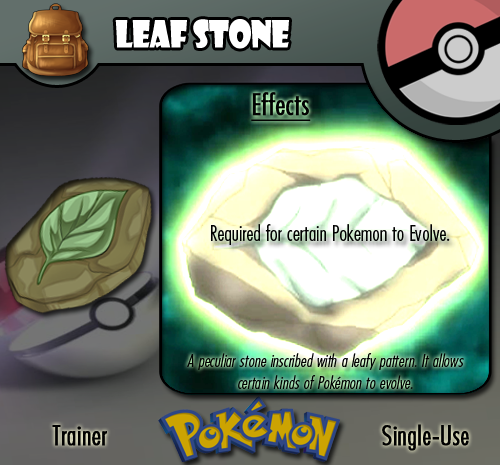
<style>
.page{position:relative;width:500px;height:465px}
.page>*{position:absolute;margin:0}
.t1{font:36.7px "ShowcardGothic-Reg";letter-spacing:-0.025em;color:#ffffff;scale:0.91 1}
.t2{font:22.2px "FuturaCondensedBQ-Light";color:#020202}
.t3{font:27.8px "FuturaCondensedBQ-Light";color:#020202;font-weight:bold}
.t4{font:30.6px "FuturaCondensedBQ-Light";color:#020202;font-weight:bold;text-decoration:underline}
.t5{font:18.1px "FuturaCondensedBQ-Light";color:#010101;font-style:italic}
.t6{font:27.8px "FuturaCondensedBQ-Light";color:#010101;font-weight:bold}
</style>
<div class="page">
<p class="t1" style="left:115px;top:19px;width:174px;height:30px">Leaf Stone</p>
<p class="t2" style="left:211px;top:92px;width:239px;height:153px"><span class="t3">  </span><span class="t4">Effects<br><br><br><br></span>Required for certain Pokemon to Evolve.</p>
<p class="t5" style="left:187px;top:353px;width:277px;height:36px;text-align:center">A peculiar stone inscribed with a leafy pattern. It allows certain kinds of Pokémon to evolve.</p>
<p class="t6" style="left:52px;top:425px;width:55px;height:21px">Trainer</p>
<p class="t6" style="left:382px;top:424px;width:87px;height:27px">Single-Use</p>
</div>
